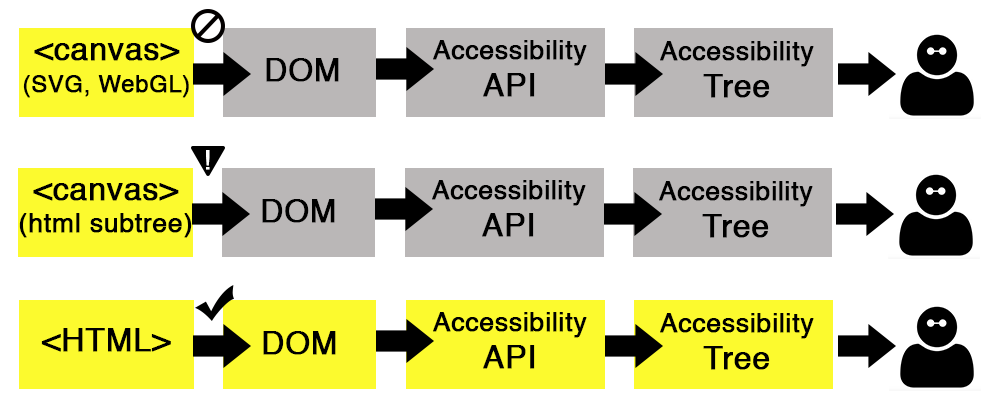
<style>
.page{position:relative;width:1000px;height:400px;background:#ffffff}
.page>*{position:absolute;margin:0}
.t1{font:26.4px/37.3px "Helvetica";letter-spacing:0.005em;color:#000000;font-weight:bold}
.t2{font:31.7px/37.3px "Helvetica";letter-spacing:0.005em;color:#000000;font-weight:bold}
.t3{font:23.8px/32px "Helvetica";letter-spacing:0.005em;color:#000000;font-weight:bold}
.t4{font:31.7px/32px "Helvetica";letter-spacing:0.005em;color:#000000;font-weight:bold}
.t5{font:31.7px "Helvetica";letter-spacing:0.005em;color:#000000;font-weight:bold}
.t6{font:26.4px "Helvetica";letter-spacing:0.005em;color:#ffffff;font-weight:bold}
.t7{font:26.4px/32px "Helvetica";letter-spacing:0.005em;color:#000000;font-weight:bold}
</style>
<div class="page">
<p class="t1" style="left:433px;top:40px;width:154px;height:57px;text-align:center">Accessibility<br><span class="t2">API</span></p>
<p class="t1" style="left:660px;top:41px;width:154px;height:57px;text-align:center">Accessibility<span class="t2"> Tree</span></p>
<p class="t3" style="left:23px;top:43px;width:166px;height:55px;text-align:center"><span class="t4">&lt;canvas&gt;<br></span>(SVG, WebGL)</p>
<p class="t5" style="left:266px;top:58px;width:73px;height:24px">DOM</p>
<p class="t6" style="left:206px;top:150px;width:4px;height:20px">!</p>
<p class="t7" style="left:19px;top:183px;width:173px;height:55px;text-align:center"><span class="t4">&lt;canvas&gt;<br></span>(html subtree)</p>
<p class="t1" style="left:432px;top:180px;width:154px;height:57px;text-align:center">Accessibility<br><span class="t2">API</span></p>
<p class="t1" style="left:659px;top:181px;width:154px;height:57px;text-align:center">Accessibility<span class="t2"> Tree</span></p>
<p class="t5" style="left:262px;top:199px;width:73px;height:24px">DOM</p>
<p class="t1" style="left:433px;top:312px;width:154px;height:57px;text-align:center">Accessibility<br><span class="t2">API</span></p>
<p class="t1" style="left:660px;top:313px;width:154px;height:57px;text-align:center">Accessibility<span class="t2"> Tree</span></p>
<p class="t5" style="left:41px;top:328px;width:130px;height:24px">&lt;HTML&gt;</p>
<p class="t5" style="left:263px;top:331px;width:73px;height:24px">DOM</p>
</div>
